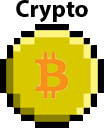
<style>
.page{position:relative;width:105px;height:128px;background:#ffffff}
.page>*{position:absolute;margin:0}
.t1{font:24px "MyriadPro-Bold";color:#000000}
</style>
<div class="page">
<p class="t1" style="left:16px;top:0px;width:72px;height:22px">Crypto</p>
</div>
